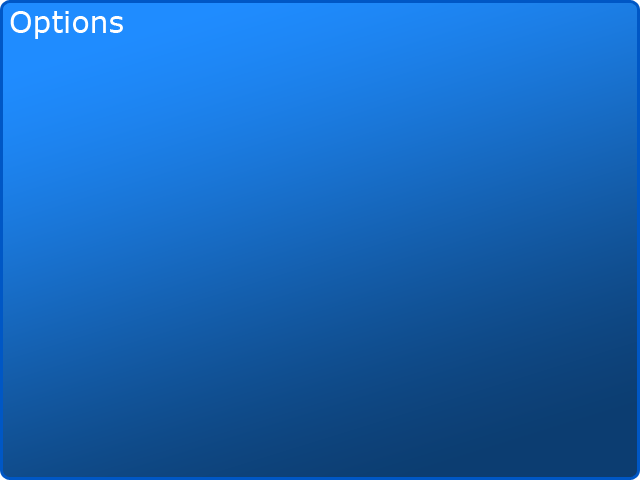
<style>
.page{position:relative;width:640px;height:480px}
.page>*{position:absolute;margin:0}
.t1{font:30px "Verdana";color:#ffffff}
</style>
<div class="page">
<p class="t1" style="left:10px;top:11px;width:113px;height:28px">Options</p>
</div>
